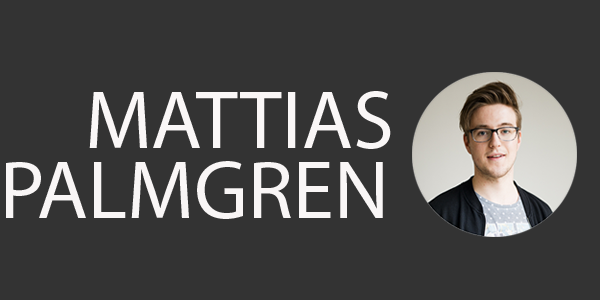
<style>
.page{position:relative;width:600px;height:300px;background:#333333}
.page>*{position:absolute;margin:0}
.t1{font:83.3px "MyriadPro-Regular";color:#faf7f7}
.t2{font:83.3px "MyriadPro-Regular";color:#f9f6f6}
</style>
<div class="page">
<p class="t1" style="left:89px;top:91px;width:302px;height:58px">MATTIAS</p>
<p class="t2" style="left:6px;top:161px;width:377px;height:58px">PALMGREN</p>
</div>
